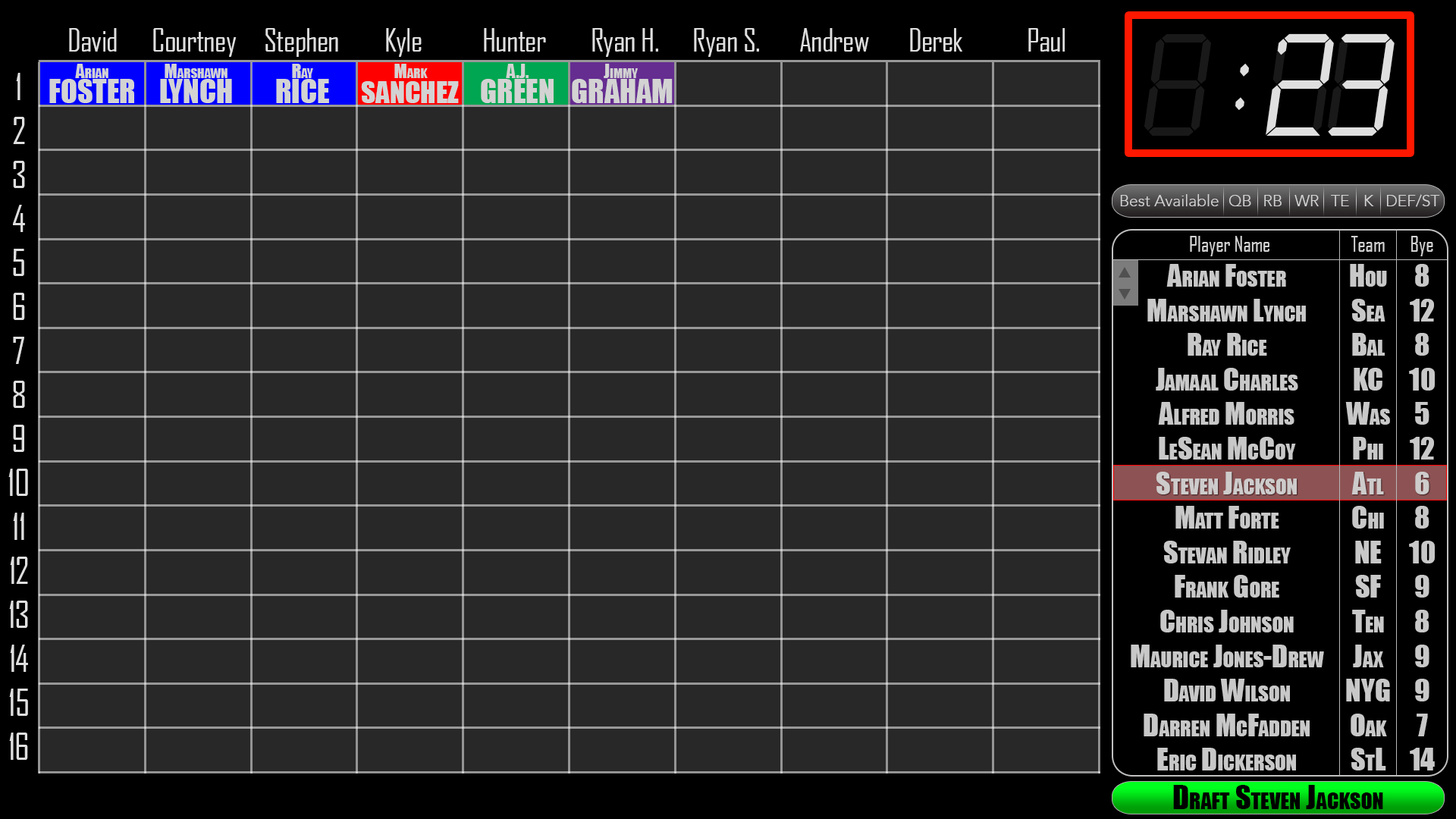
<style>
.page{position:relative;width:1456px;height:819px;background:#282828}
.page>*{position:absolute;margin:0}
.t1{font:31.1px "AgencyFB-Reg";letter-spacing:-0.02em;color:#dfdfdf}
.t2{font:127.4px "LCDMonoLight";letter-spacing:-0.02em}
.t3{font:127.4px "LCDMonoLight";letter-spacing:-0.02em;color:#dfdfdf}
.t4{font:18.2px "Impact";color:#d3d3d3;font-variant:small-caps}
.t5{font:35.6px/44px "AgencyFB-Reg";letter-spacing:-0.02em;color:#dfdfdf}
.t6{font:30.3px "Impact";color:#d3d3d3;text-transform:uppercase}
.t7{font:28.1px "Impact";color:#d3d3d3;text-transform:uppercase}
.t8{font:15.9px "Avenir-Light";color:#d3d3d3}
.t9{font:20.5px "AgencyFB-Reg";color:#d3d3d3}
.t10{font:28.8px "Impact";color:#d3d3d3;font-variant:small-caps}
.t11{font:30.3px "Impact";color:#000000;font-variant:small-caps}
</style>
<div class="page">
<p class="t1" style="left:69px;top:28px;width:48px;height:24px">David</p>
<p class="t1" style="left:153px;top:28px;width:84px;height:29px">Courtney</p>
<p class="t1" style="left:265px;top:28px;width:73px;height:29px">Stephen</p>
<p class="t1" style="left:386px;top:28px;width:36px;height:29px">Kyle</p>
<p class="t1" style="left:484px;top:28px;width:62px;height:24px">Hunter</p>
<p class="t1" style="left:592px;top:28px;width:66px;height:29px">Ryan H.</p>
<p class="t1" style="left:694px;top:28px;width:65px;height:29px">Ryan S.</p>
<p class="t1" style="left:800px;top:28px;width:69px;height:24px">Andrew</p>
<p class="t1" style="left:910px;top:28px;width:52px;height:24px">Derek</p>
<p class="t1" style="left:1028px;top:28px;width:37px;height:24px">Paul</p>
<p class="t2" style="left:1144px;top:33px;width:251px;height:103px">8 88</p>
<p class="t3" style="left:1266px;top:33px;width:129px;height:103px">23</p>
<p class="t4" style="left:75px;top:64px;width:33px;height:14px">Arian</p>
<p class="t4" style="left:165px;top:64px;width:62px;height:14px">Marshawn</p>
<p class="t4" style="left:292px;top:64px;width:21px;height:14px">Ray</p>
<p class="t4" style="left:394px;top:64px;width:34px;height:14px">Mark</p>
<p class="t4" style="left:506px;top:64px;width:23px;height:14px">A.J.</p>
<p class="t4" style="left:604px;top:64px;width:34px;height:14px">Jimmy</p>
<p class="t3" style="left:1235px;top:64px;width:14px;height:46px">:</p>
<p class="t5" style="left:8px;top:73px;width:20px;height:687px;text-align:center">1<br>2<br>3<br>4<br>5<br>6<br>7<br>8<br>9<br>10<br>11<br>12<br>13<br>14<br>15<br>16</p>
<p class="t6" style="left:49px;top:79px;width:85px;height:24px">Foster</p>
<p class="t6" style="left:160px;top:79px;width:72px;height:24px">Lynch</p>
<p class="t6" style="left:276px;top:79px;width:53px;height:24px">Rice</p>
<p class="t7" style="left:361px;top:81px;width:98px;height:22px">Sanchez</p>
<p class="t6" style="left:481px;top:79px;width:73px;height:24px">Green</p>
<p class="t6" style="left:572px;top:79px;width:101px;height:24px">Graham</p>
<p class="t8" style="left:1120px;top:194px;width:99px;height:12px">Best Available</p>
<p class="t8" style="left:1228px;top:195px;width:23px;height:11px">QB</p>
<p class="t8" style="left:1264px;top:195px;width:18px;height:11px">RB</p>
<p class="t8" style="left:1294px;top:195px;width:25px;height:11px">WR</p>
<p class="t8" style="left:1331px;top:195px;width:18px;height:11px">TE</p>
<p class="t8" style="left:1364px;top:195px;width:10px;height:11px">K</p>
<p class="t8" style="left:1387px;top:194px;width:53px;height:13px">DEF/ST</p>
<p class="t9" style="left:1190px;top:236px;width:79px;height:20px">Player Name</p>
<p class="t9" style="left:1351px;top:236px;width:34px;height:16px">Team</p>
<p class="t9" style="left:1411px;top:236px;width:22px;height:20px">Bye</p>
<p class="t10" style="left:1131px;top:264px;width:193px;height:506px;text-align:center;opacity:0.92">Arian Foster<br>Marshawn Lynch<br>Ray Rice<br>Jamaal Charles<br>Alfred Morris<br>LeSean McCoy<br>Steven Jackson<br>Matt Forte<br>Stevan Ridley<br>Frank Gore<br>Chris Johnson<br>Maurice Jones-Drew<br>David Wilson<br>Darren McFadden<br>Eric Dickerson</p>
<p class="t10" style="left:1345px;top:264px;width:45px;height:506px;text-align:center;opacity:0.92">Hou<br>Sea<br>Bal<br>KC<br>Was<br>Phi<br>Atl<br>Chi<br>NE<br>SF<br>Ten<br>Jax<br>NYG<br>Oak<br>StL</p>
<p class="t10" style="left:1409px;top:264px;width:26px;height:506px;text-align:center;opacity:0.92">8<br>12<br>8<br>10<br>5<br>12<br>6<br>8<br>10<br>9<br>8<br>9<br>9<br>7<br>14</p>
<p class="t11" style="left:1173px;top:785px;width:210px;height:24px">Draft Steven Jackson</p>
</div>
